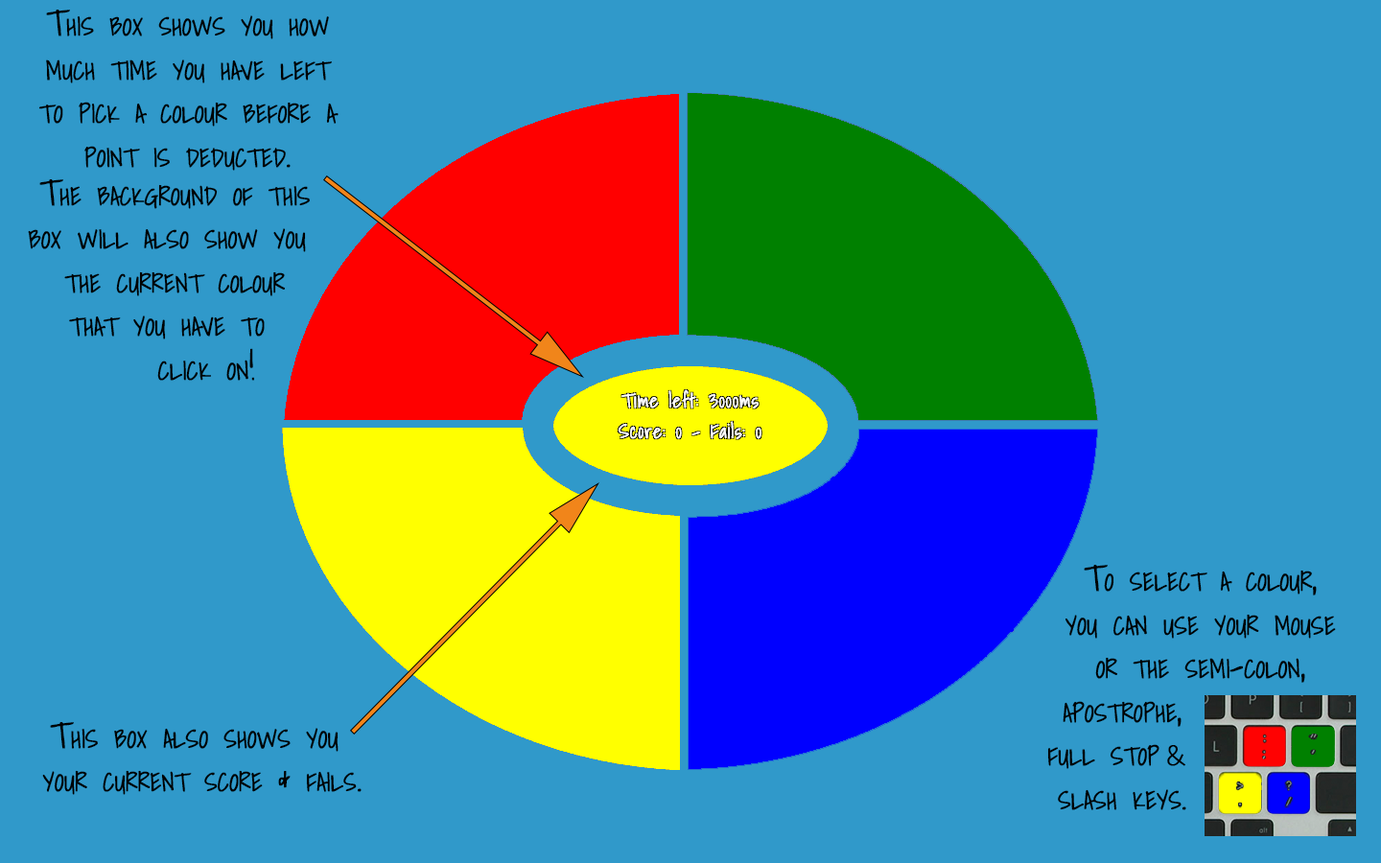
<style>
.page{position:relative;width:1381px;height:863px;background:#3099ca}
.page>*{position:absolute;margin:0}
.t1{font:36.5px "ShadowsIntoLight";color:#000000;font-variant:small-caps;font-weight:bold;scale:0.9 1}
.t2{font:29.7px "Seravek-ExtraLight";letter-spacing:-0.18em;color:#000000;font-variant:small-caps;font-weight:bold;scale:0.9 1}
</style>
<div class="page">
<p class="t1" style="left:38px;top:10px;width:301px;height:161px;text-align:center">This box shows you how<br>much time you have left<br>to pick a colour before a<br>point is deducted.</p>
<p class="t1" style="left:28px;top:179px;width:282px;height:202px;text-align:center">The background of this <br>box will also show you  <br>the current colour <br>that you have to  <br>   click on!</p>
<p class="t1" style="left:1047px;top:565px;width:289px;height:246px;text-align:center">To select a colour,<br>you can use your mouse<br>or the semi-colon,<br>apostrophe,          <br>full stop <span class="t2">&amp;</span>           <br>slash keys.</p>
<p class="t1" style="left:42px;top:722px;width:320px;height:73px;text-align:center">This box also shows you <br>your current score &amp; fails.</p>
</div>
